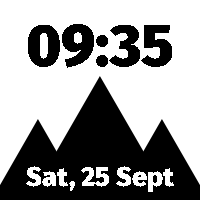
<style>
.page{position:relative;width:200px;height:200px;background:#ffffff}
.page>*{position:absolute;margin:0}
.t1{font:58.8px "FiraSans-Black";color:#000000}
.t2{font:27.4px "FiraSans-Black";color:#ffffff}
</style>
<div class="page">
<p class="t1" style="left:28px;top:24px;width:144px;height:44px">09:35</p>
<p class="t2" style="left:26px;top:166px;width:148px;height:26px">Sat, 25 Sept</p>
</div>
